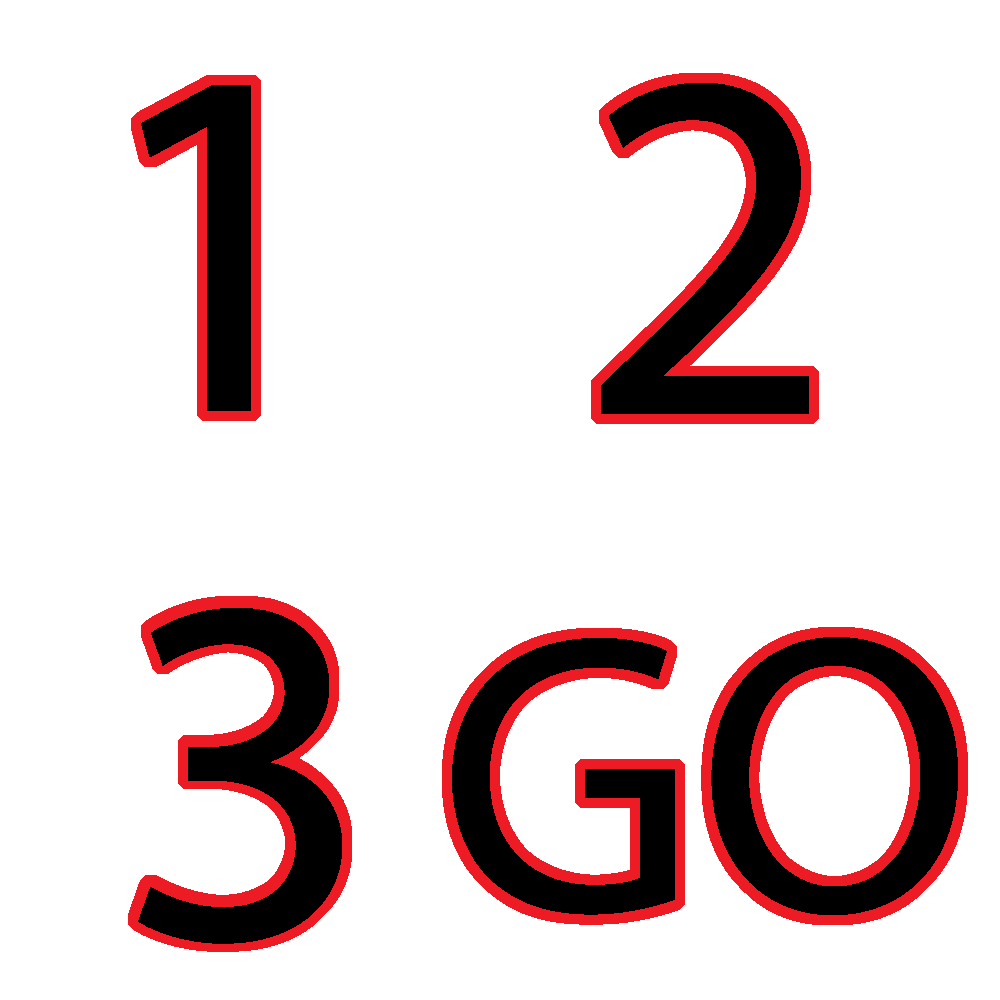
<style>
.page{position:relative;width:1000px;height:1000px;background:#ffffff}
.page>*{position:absolute;margin:0}
.t1{font:500.1px "MyriadPro-Regular";color:#000000}
.t2{font:400.1px "MyriadPro-Regular";color:#000000}
</style>
<div class="page">
<p class="t1" style="left:141px;top:85px;width:110px;height:326px">1</p>
<p class="t1" style="left:601px;top:83px;width:208px;height:331px">2</p>
<p class="t1" style="left:138px;top:608px;width:204px;height:336px">3</p>
<p class="t2" style="left:452px;top:637px;width:506px;height:278px">GO</p>
</div>
